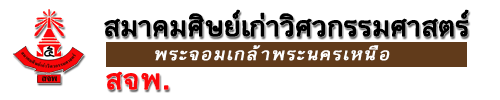
<style>
.page{position:relative;width:500px;height:100px;background:#ffffff}
.page>*{position:absolute;margin:0}
.t1{font:38px "THKrub-Bold";letter-spacing:-0.025em;color:#000000;font-weight:bold}
.t2{font:24px "THKrub-Bold";letter-spacing:0.05em;color:#fefefe;font-weight:bold;font-style:italic}
.t3{font:38px "THKrub-Bold";letter-spacing:0.005em;color:#fc070a;font-weight:bold}
</style>
<div class="page">
<p class="t1" style="left:104px;top:9px;width:365px;height:28px">สมาคมศิษย์เก่าวิศวกรรมศาสตร์</p>
<p class="t2" style="left:155px;top:45px;width:235px;height:16px">พระจอมเกล้าพระนครเหนือ</p>
<p class="t3" style="left:106px;top:71px;width:63px;height:19px">สจพ.</p>
</div>
